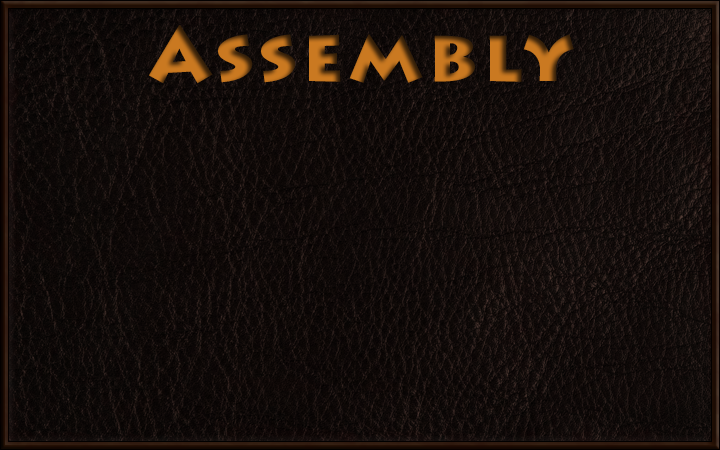
<style>
.page{position:relative;width:720px;height:450px}
.page>*{position:absolute;margin:0}
.t1{font:75px "LithosPro-Black";letter-spacing:0.06em}
</style>
<div class="page">
<p class="t1" style="left:149px;top:25px;width:425px;height:59px">Assembly</p>
</div>
